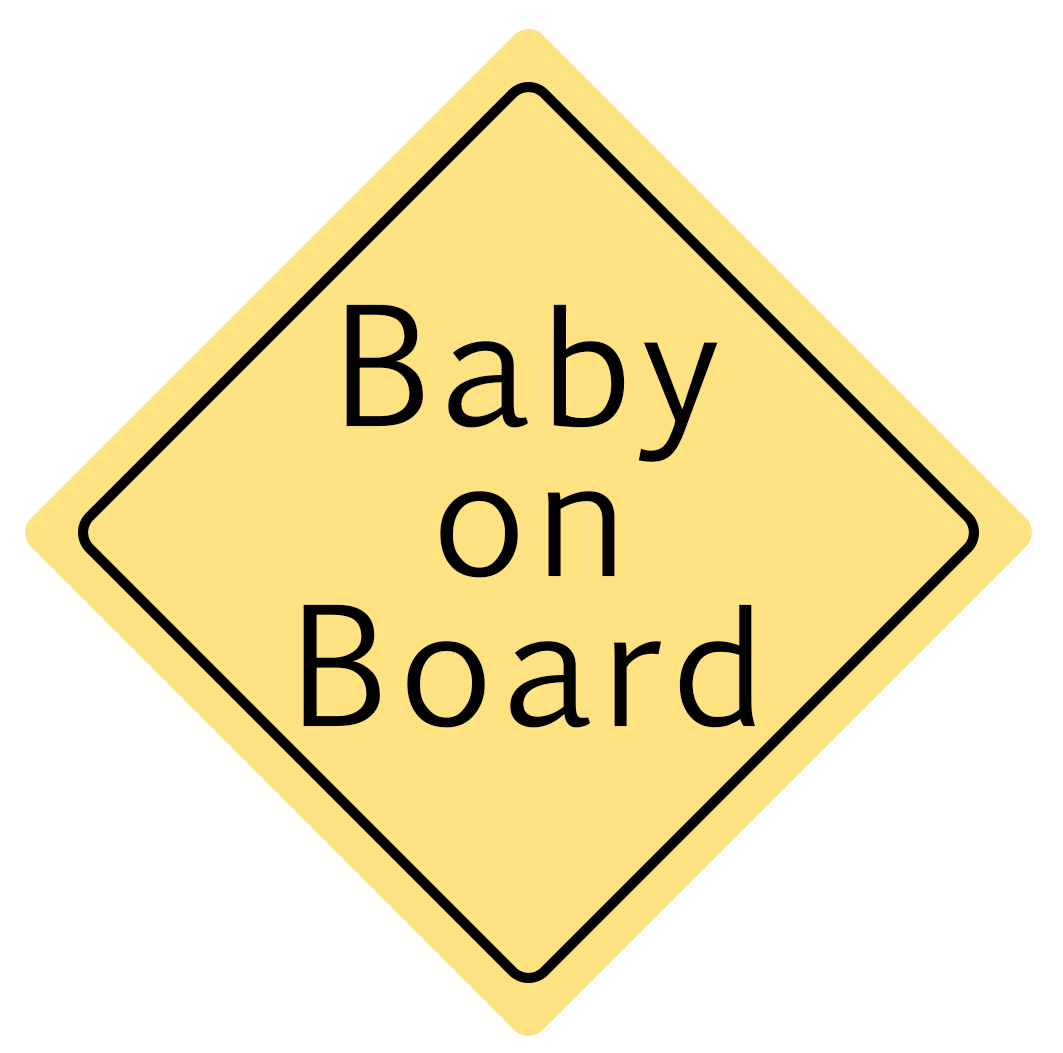
<style>
.page{position:relative;width:1063px;height:1053px;background:#ffffff}
.page>*{position:absolute;margin:0}
.t1{font:158.3px/150px "EuphemiaUCAS";letter-spacing:0.06em;color:#000000}
</style>
<div class="page">
<p class="t1" style="left:303px;top:304px;width:452px;height:424px;text-align:center">Baby<br>on<br>Board</p>
</div>
